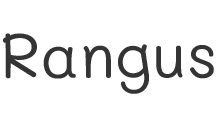
<style>
.page{position:relative;width:216px;height:129px;background:#ffffff}
.page>*{position:absolute;margin:0}
.t1{font:63.5px "Mali-Regular";color:#343434}
</style>
<div class="page">
<p class="t1" style="left:3px;top:33px;width:211px;height:61px">Rangus</p>
</div>
